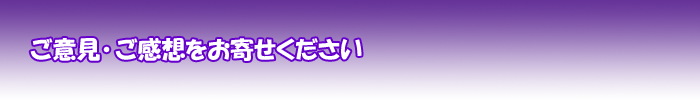
<style>
.page{position:relative;width:700px;height:100px}
.page>*{position:absolute;margin:0}
.t1{font:24px "HGPSoeiKakupoptai";color:#ffffff}
</style>
<div class="page">
<p class="t1" style="left:30px;top:38px;width:332px;height:23px">ご意見･ご感想をお寄せください</p>
</div>
